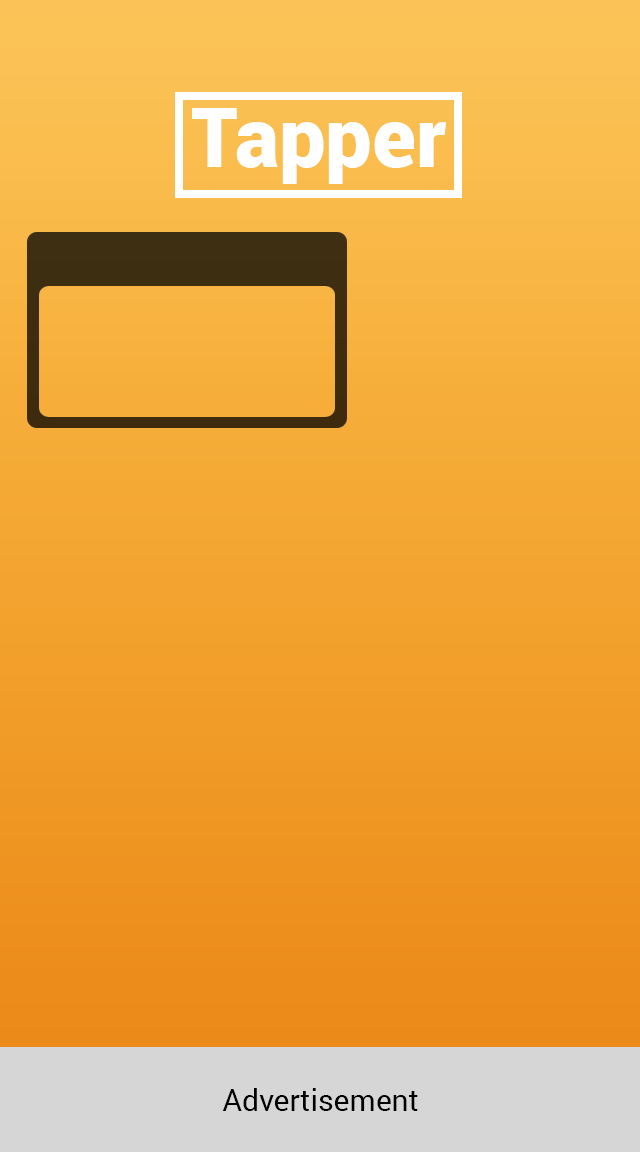
<style>
.page{position:relative;width:640px;height:1152px}
.page>*{position:absolute;margin:0}
.t1{font:83px "Roboto-Black";color:#ffffff}
.t2{font:30px "Roboto-Regular";color:#000000}
</style>
<div class="page">
<p class="t1" style="left:192px;top:108px;width:254px;height:76px">Tapper</p>
<p class="t2" style="left:222px;top:1088px;width:196px;height:23px">Advertisement</p>
</div>
